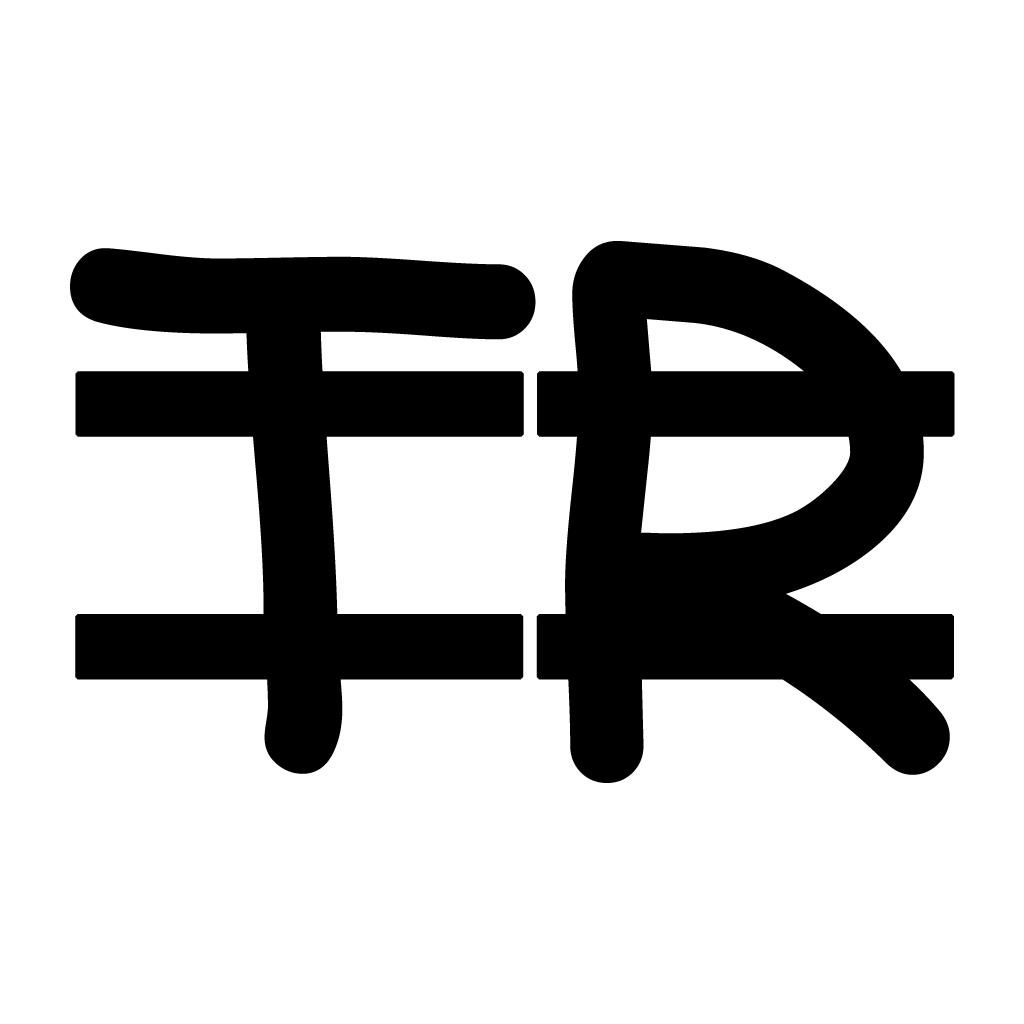
<style>
.page{position:relative;width:1024px;height:1024px;background:#ffffff}
.page>*{position:absolute;margin:0}
.t1{font:700px "Amoon1";color:#000000;font-weight:bold}
</style>
<div class="page">
<p class="t1" style="left:70px;top:241px;width:885px;height:542px">TR</p>
</div>
